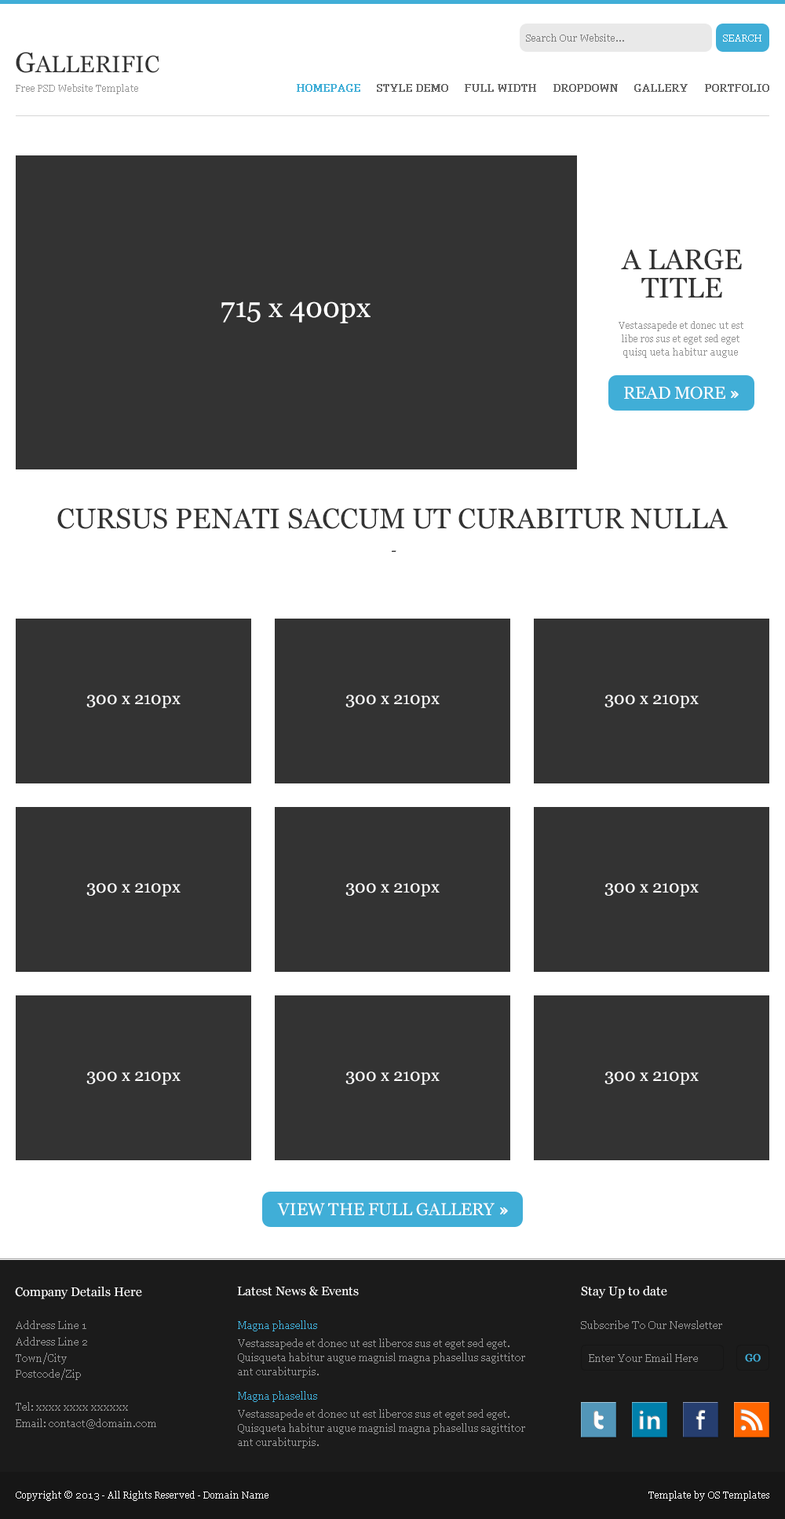
<style>
.page{position:relative;width:785px;height:1519px;background:#333333}
.page>*{position:absolute;margin:0}
.t1{font:9.4px "Georgia";color:#808080}
.t2{font:9.4px "Georgia";color:#ffffff}
.t3{font:23.6px "Georgia";color:#333333}
.t4{font:28.3px "Georgia";color:#333333}
.t5{font:9.4px "Georgia";color:#999999}
.t6{font:10.2px "Georgia";color:#40aed7;font-weight:bold}
.t7{font:10.2px "Georgia";color:#666666;font-weight:bold}
.t8{font:28.3px/28.3px "Georgia";color:#333333}
.t9{font:28.3px "Georgia";color:#ffffff}
.t10{font:9.4px/13.2px "Georgia";color:#979797}
.t11{font:17.3px "Georgia";color:#ffffff}
.t12{font:17.3px "Georgia";color:#ffffff;font-weight:bold}
.t13{font:14.1px "Georgia";color:#333333;font-style:italic}
.t14{font:12.6px "Georgia";color:#ffffff}
.t15{font:10.2px/16.3px "Georgia";color:#979797}
.t16{font:10.2px "Georgia";color:#40aed7}
.t17{font:11px "Georgia";color:#979797}
.t18{font:10.2px/14.3px "Georgia";color:#979797}
.t19{font:10.2px "Georgia";color:#989898}
.t20{font:10.2px "Georgia";color:#40aed7;text-transform:uppercase;font-weight:bold}
</style>
<div class="page">
<p class="t1" style="left:526px;top:34px;width:98px;height:8px">Search Our Website...</p>
<p class="t2" style="left:723px;top:35px;width:38px;height:7px">SEARCH</p>
<p class="t3" style="left:16px;top:52px;width:143px;height:21px"><span class="t4">G</span>ALLERIFIC</p>
<p class="t5" style="left:16px;top:84px;width:122px;height:10px">Free PSD Website Template</p>
<p class="t6" style="left:297px;top:84px;width:63px;height:8px">HOMEPAGE</p>
<p class="t7" style="left:377px;top:84px;width:71px;height:8px">STYLE DEMO</p>
<p class="t7" style="left:465px;top:84px;width:71px;height:8px">FULL WIDTH</p>
<p class="t7" style="left:553px;top:84px;width:65px;height:8px">DROPDOWN</p>
<p class="t7" style="left:634px;top:84px;width:54px;height:8px">GALLERY</p>
<p class="t7" style="left:705px;top:84px;width:64px;height:8px">PORTFOLIO</p>
<p class="t8" style="left:621px;top:249px;width:121px;height:49px;text-align:center">A LARGE<br>TITLE</p>
<p class="t9" style="left:221px;top:301px;width:150px;height:22px">715 x 400px</p>
<p class="t10" style="left:619px;top:321px;width:124px;height:37px;text-align:center">Vestassapede et donec ut est libe ros sus et eget sed eget quisq ueta habitur augue</p>
<p class="t11" style="left:624px;top:386px;width:115px;height:14px">READ MORE <span class="t12">»</span></p>
<p class="t4" style="left:57px;top:508px;width:671px;height:21px">CURSUS PENATI SACCUM UT CURABITUR NULLA</p>
<p class="t13" style="left:392px;top:550px;width:4px;height:2px">-</p>
<p class="t11" style="left:86px;top:695px;width:95px;height:13px">300 x 210px</p>
<p class="t11" style="left:345px;top:695px;width:95px;height:13px">300 x 210px</p>
<p class="t11" style="left:604px;top:695px;width:95px;height:13px">300 x 210px</p>
<p class="t11" style="left:86px;top:883px;width:95px;height:13px">300 x 210px</p>
<p class="t11" style="left:345px;top:883px;width:95px;height:13px">300 x 210px</p>
<p class="t11" style="left:604px;top:883px;width:95px;height:13px">300 x 210px</p>
<p class="t11" style="left:86px;top:1072px;width:95px;height:13px">300 x 210px</p>
<p class="t11" style="left:345px;top:1072px;width:95px;height:13px">300 x 210px</p>
<p class="t11" style="left:604px;top:1072px;width:95px;height:13px">300 x 210px</p>
<p class="t11" style="left:277px;top:1203px;width:231px;height:13px">VIEW THE FULL GALLERY <span class="t12">»</span></p>
<p class="t14" style="left:15px;top:1287px;width:127px;height:12px">Company Details Here</p>
<p class="t14" style="left:237px;top:1286px;width:122px;height:10px">Latest News &amp; Events</p>
<p class="t14" style="left:581px;top:1286px;width:86px;height:12px">Stay Up to date</p>
<p class="t15" style="left:16px;top:1320px;width:140px;height:109px">Address Line 1<br>Address Line 2<br>Town/City<br>Postcode/Zip<br><br>Tel: xxxx xxxx xxxxxx<br>Email: contact@domain.com</p>
<p class="t16" style="left:238px;top:1320px;width:79px;height:11px">Magna phasellus</p>
<p class="t17" style="left:581px;top:1320px;width:141px;height:9px">Subscribe To Our Newsletter</p>
<p class="t18" style="left:238px;top:1338px;width:287px;height:40px">Vestassapede et donec ut est liberos sus et eget sed eget. Quisqueta habitur augue magnisl magna phasellus sagittitor ant curabiturpis.</p>
<p class="t19" style="left:589px;top:1353px;width:109px;height:9px">Enter Your Email Here</p>
<p class="t20" style="left:745px;top:1353px;width:16px;height:9px">GO</p>
<p class="t16" style="left:238px;top:1391px;width:79px;height:11px">Magna phasellus</p>
<p class="t18" style="left:238px;top:1409px;width:287px;height:39px">Vestassapede et donec ut est liberos sus et eget sed eget. Quisqueta habitur augue magnisl magna phasellus sagittitor ant curabiturpis.</p>
<p class="t2" style="left:16px;top:1491px;width:252px;height:10px">Copyright © 2013 - All Rights Reserved - Domain Name</p>
<p class="t2" style="left:648px;top:1491px;width:121px;height:10px">Template by OS Templates</p>
</div>
